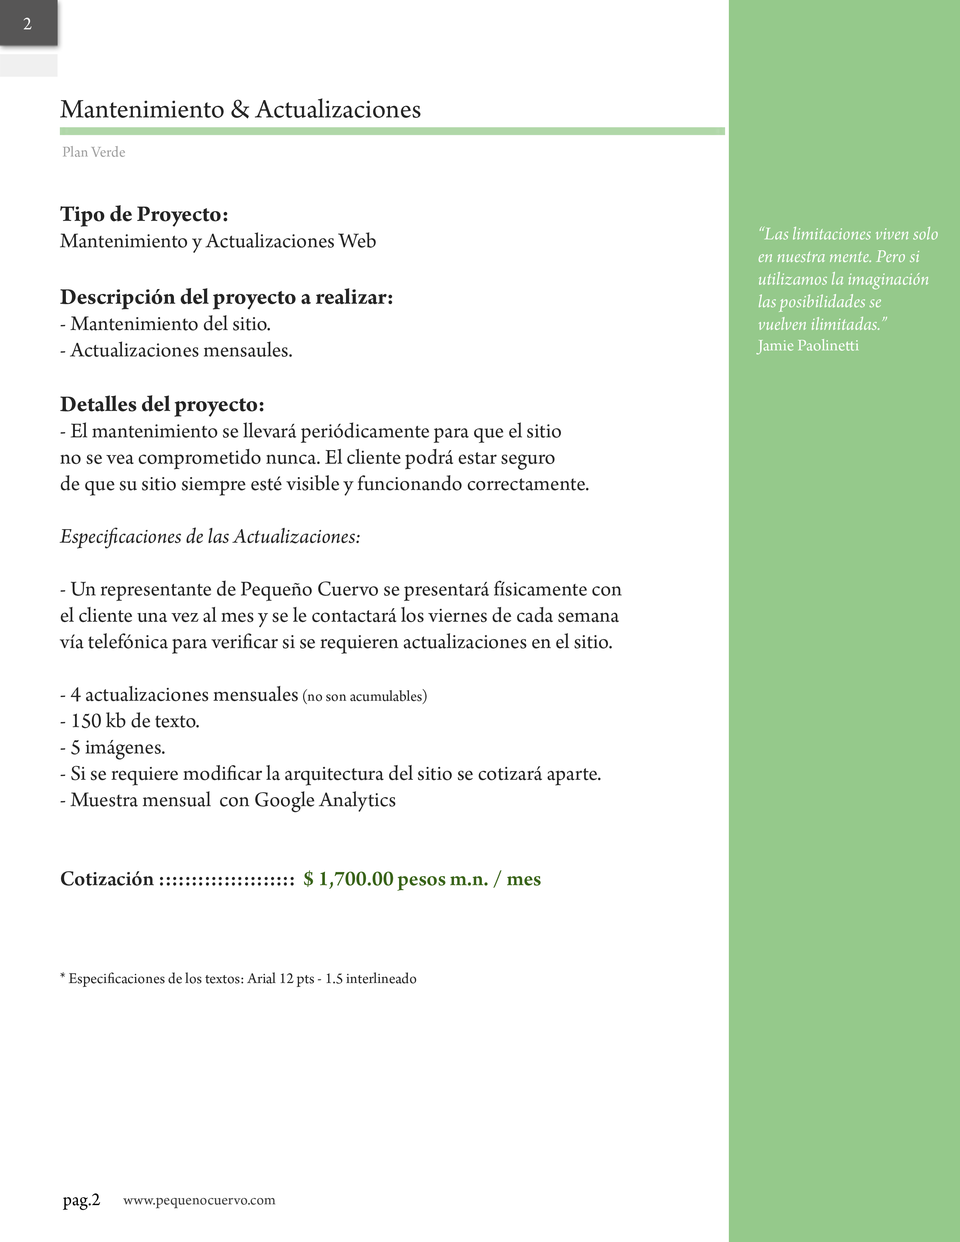
<style>
.page{position:relative;width:960px;height:1242px;background:#ffffff}
.page>*{position:absolute;margin:0}
.t1{font:18.8px "ArnoPro-Regular";color:#fcfcfc}
.t2{font:28.2px "ArnoPro-Regular";color:#252525}
.t3{font:15.7px "ArnoPro-Regular";color:#a0a0a0}
.t4{font:22px "ArnoPro-Regular";color:#252525}
.t5{font:23.5px "ArnoPro-Regular";color:#252525}
.t6{font:23.5px "ArnoPro-Bold";color:#252525}
.t7{font:22px "ArnoPro-Italic";color:#252525}
.t8{font:15.7px "ArnoPro-Regular";color:#252525}
.t9{font:22px "ArnoPro-Smbd";color:#252525}
.t10{font:22px "ArnoPro-Smbd";color:#386318}
.t11{font:18.8px "ArnoPro-Italic";color:#ffffff}
.t12{font:17.3px "ArnoPro-Regular";color:#ffffff}
.t13{font:18.8px "ArnoPro-Regular";color:#010101}
.t14{font:15.7px "ArnoPro-Regular";color:#3c3c3c}
</style>
<div class="page">
<p class="t1" style="left:23px;top:18px;width:9px;height:11px">2</p>
<p class="t2" style="left:60px;top:98px;width:360px;height:21px">Mantenimiento &amp; Actualizaciones</p>
<p class="t3" style="left:62px;top:146px;width:63px;height:11px">Plan Verde</p>
<p class="t4" style="left:59px;top:205px;width:563px;height:782px"><span class="t5"><br></span><span class="t6">Tipo de Proyecto: <br></span>Mantenimiento y Actualizaciones Web<br><br><span class="t6">Descripción del proyecto a realizar:<br></span>- Mantenimiento del sitio. <br>- Actualizaciones mensaules.<br><br><span class="t6">Detalles del proyecto:<br></span>- El mantenimiento se llevará periódicamente para que el sitio<br>no se vea comprometido nunca. El cliente podrá estar seguro<br>de que su sitio siempre esté visible y funcionando correctamente.<br><br><span class="t7">Especificaciones de las Actualizaciones:<br><br></span>- Un representante de Pequeño Cuervo se presentará físicamente con <br>el cliente una vez al mes y se le contactará los viernes de cada semana <br>vía telefónica para verificar si se requieren actualizaciones en el sitio.<br><br>- 4 actualizaciones mensuales<span class="t8"> (no son acumulables)<br></span>- 150 kb de texto.<br>- 5 imágenes.<br>- Si se requiere modificar la arquitectura del sitio se cotizará aparte. <br>- Muestra mensual  con Google Analytics<br><br><br><span class="t9">Cotización :::::::::::::::::::::  </span><span class="t10">$ 1,700.00 pesos m.n. / mes<br><br><br><br></span><span class="t8">* Especificaciones de los textos: Arial 12 pts - 1.5 interlineado</span></p>
<p class="t11" style="left:756px;top:226px;width:182px;height:129px">“Las limitaciones viven solo<br>en nuestra mente. Pero si <br>utilizamos la imaginación<br>las posibilidades se<br>vuelven ilimitadas.”<br><span class="t12">Jamie Paolinetti</span></p>
<p class="t13" style="left:63px;top:1194px;width:37px;height:16px">pag.2</p>
<p class="t14" style="left:123px;top:1198px;width:153px;height:11px">www.pequenocuervo.com</p>
</div>
